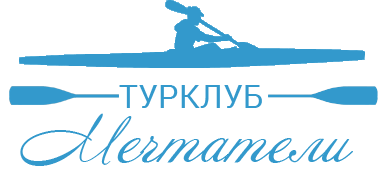
<style>
.page{position:relative;width:382px;height:170px;background:#ffffff}
.page>*{position:absolute;margin:0}
.t1{font:31.9px "Roboto-Regular";color:#3399cc}
.t2{font:58.8px "Annabelle";color:#3399cc}
</style>
<div class="page">
<p class="t1" style="left:119px;top:85px;width:143px;height:23px">ТУРКЛУБ</p>
<p class="t2" style="left:20px;top:113px;width:333px;height:53px">Мечтатели</p>
</div>
